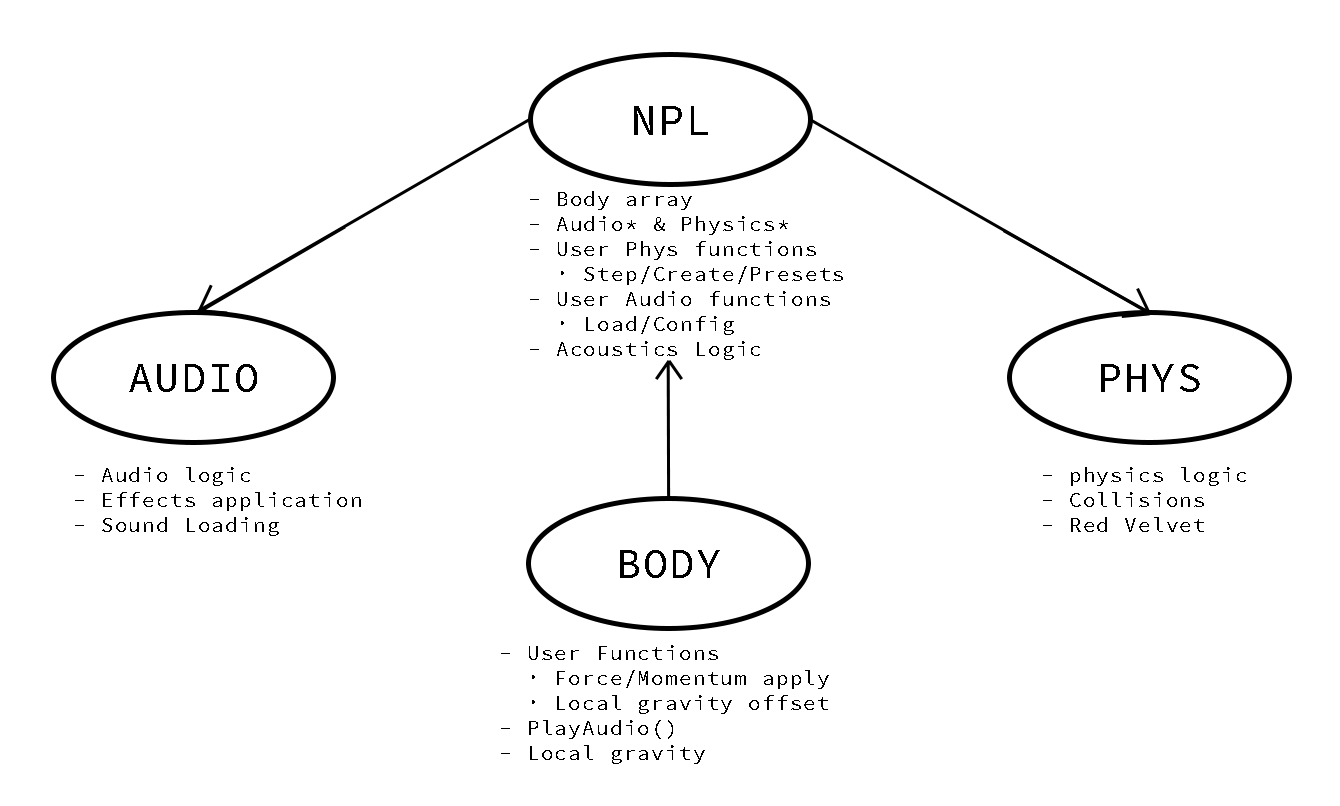
<style>
.page{position:relative;width:1340px;height:806px;background:#ffffff}
.page>*{position:absolute;margin:0}
.t1{font:20.8px "SourceCodePro-Regular";letter-spacing:0.04em;color:#000000}
</style>
<div class="page">
<p class="t1" style="left:530px;top:191px;width:313px;height:169px">- Body array<br>- Audio* &amp; Physics*<br>- User Phys functions<br>  · Step/Create/Presets<br>- User Audio functions<br>  · Load/Config<br>- Acoustics Logic</p>
<p class="t1" style="left:75px;top:467px;width:286px;height:69px">- Audio logic<br>- Effects application<br>- Sound Loading</p>
<p class="t1" style="left:1043px;top:467px;width:203px;height:65px">- physics logic<br>- Collisions<br>- Red Velvet</p>
<p class="t1" style="left:501px;top:645px;width:328px;height:119px">- User Functions<br>  · Force/Momentum apply<br>  · Local gravity offset<br>- PlayAudio()<br>- Local gravity</p>
</div>
